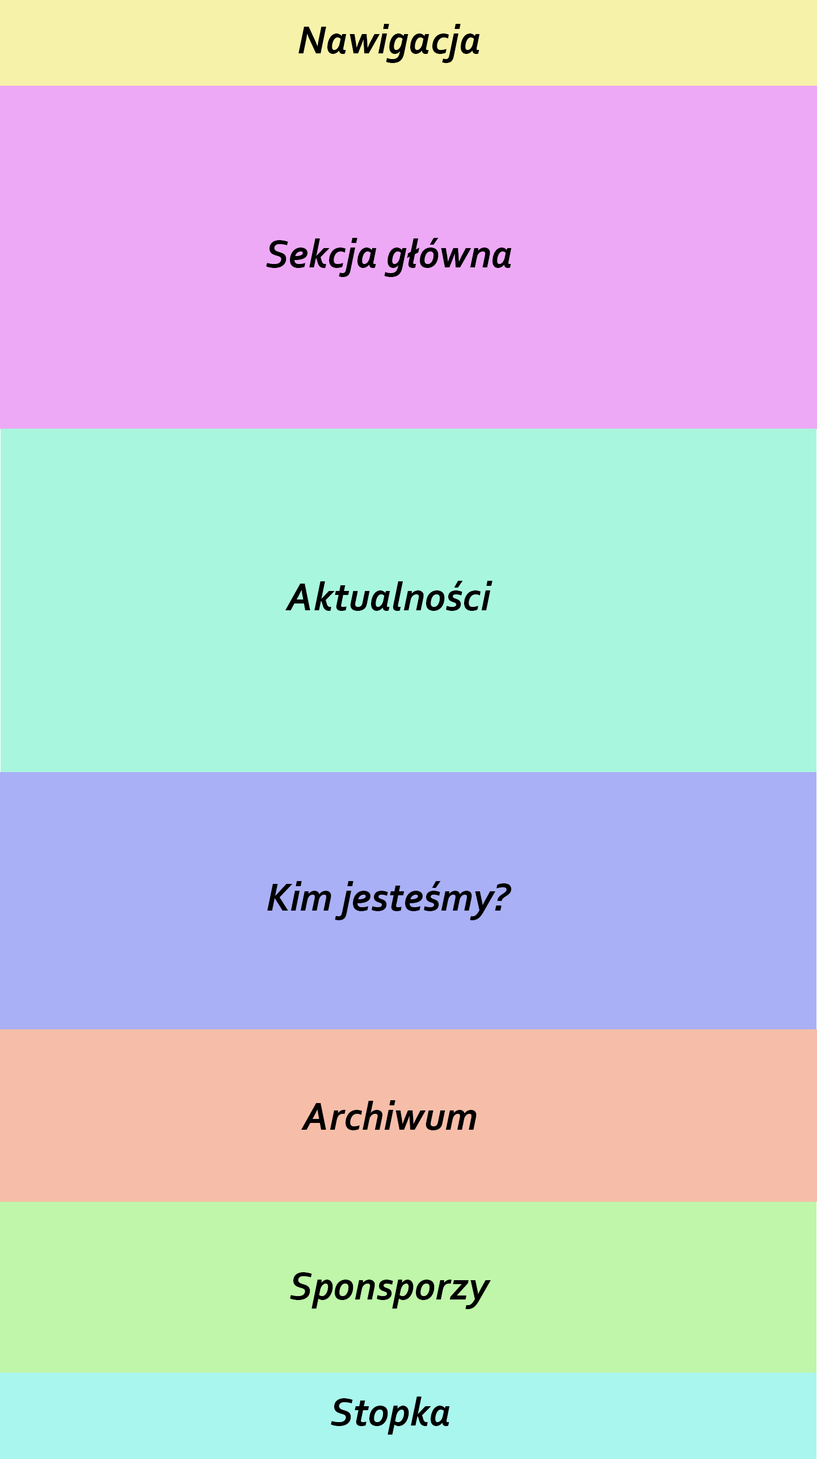
<style>
.page{position:relative;width:817px;height:1459px;background:#a9f6de}
.page>*{position:absolute;margin:0}
.t1{font:40.9px "Corbel-BoldItalic";color:#000000}
</style>
<div class="page">
<p class="t1" style="left:299px;top:24px;width:181px;height:39px">Nawigacja</p>
<p class="t1" style="left:266px;top:238px;width:246px;height:39px">Sekcja główna</p>
<p class="t1" style="left:286px;top:581px;width:207px;height:30px">Aktualności</p>
<p class="t1" style="left:267px;top:881px;width:245px;height:39px">Kim jesteśmy?</p>
<p class="t1" style="left:301px;top:1100px;width:176px;height:30px">Archiwum</p>
<p class="t1" style="left:290px;top:1272px;width:201px;height:37px">Sponsporzy</p>
<p class="t1" style="left:331px;top:1396px;width:119px;height:38px">Stopka</p>
</div>
